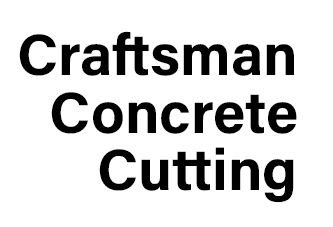
<style>
.page{position:relative;width:333px;height:227px;background:#ffffff}
.page>*{position:absolute;margin:0}
.t1{font:58.3px "AcuminConcept-Bold";color:#000000}
</style>
<div class="page">
<p class="t1" style="left:19px;top:31px;width:275px;height:45px">Craftsman</p>
<p class="t1" style="left:51px;top:92px;width:246px;height:42px">Concrete</p>
<p class="t1" style="left:99px;top:147px;width:195px;height:56px">Cutting</p>
</div>
